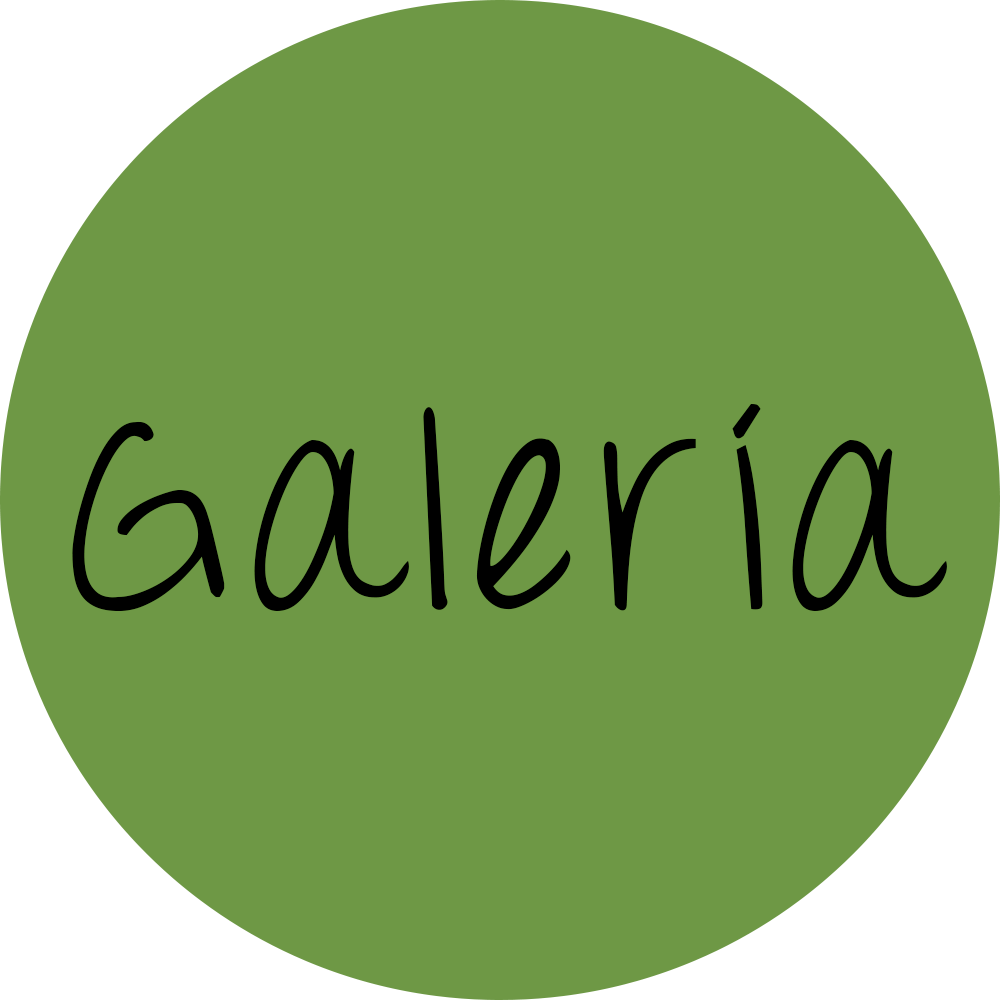
<style>
.page{position:relative;width:1000px;height:1000px;background:#6e9845}
.page>*{position:absolute;margin:0}
.t1{font:277.8px "ThrowMyHandsUpintheAir";letter-spacing:0.075em;color:#000000}
</style>
<div class="page">
<p class="t1" style="left:72px;top:404px;width:875px;height:207px">Galería</p>
</div>
